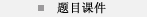
<style>
.page{position:relative;width:147px;height:17px;background:#f1f1f1}
.page>*{position:absolute;margin:0}
.t1{font:12px "SimSun";color:#000000;font-weight:bold}
</style>
<div class="page">
<p class="t1" style="left:57px;top:2px;width:49px;height:12px">题目课件</p>
</div>
